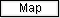
<style>
.page{position:relative;width:60px;height:18px;background:#ffffff}
.page>*{position:absolute;margin:0}
.t1{font:12px "ArialMT";color:#000000}
</style>
<div class="page">
<p class="t1" style="left:20px;top:3px;width:21px;height:11px">Map</p>
</div>
